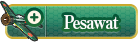
<style>
.page{position:relative;width:138px;height:43px;background:#ffffff}
.page>*{position:absolute;margin:0}
.t1{font:18px "RyuminPro-ExBold";letter-spacing:-0.08em;color:#ffffff;scale:0.9 1}
</style>
<div class="page">
<p class="t1" style="left:64px;top:15px;width:55px;height:15px">Pesawat</p>
</div>
